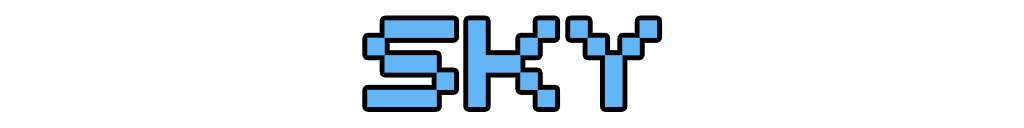
<style>
.page{position:relative;width:1024px;height:128px;background:#ffffff}
.page>*{position:absolute;margin:0}
.t1{font:120px "RetroComputer";color:#64b5f6}
</style>
<div class="page">
<p class="t1" style="left:367px;top:20px;width:291px;height:87px">Sky</p>
</div>
